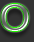
<style>
.page{position:relative;width:34px;height:42px;background:#333333}
.page>*{position:absolute;margin:0}
.t1{font:35.8px "Tahoma";scale:1.17 1}
</style>
<div class="page">
<p class="t1" style="left:1px;top:4px;width:28px;height:27px">O</p>
</div>
